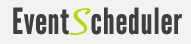
<style>
.page{position:relative;width:191px;height:44px;background:#f2f2f2}
.page>*{position:absolute;margin:0}
.t1{font:36px "LeagueGothic";letter-spacing:0.02em;color:#403f3f}
.t2{font:36px "BlackJack";letter-spacing:0.02em;color:#b0da09}
</style>
<div class="page">
<p class="t1" style="left:13px;top:7px;width:169px;height:28px">Event<span class="t2">S</span>cheduler</p>
</div>
